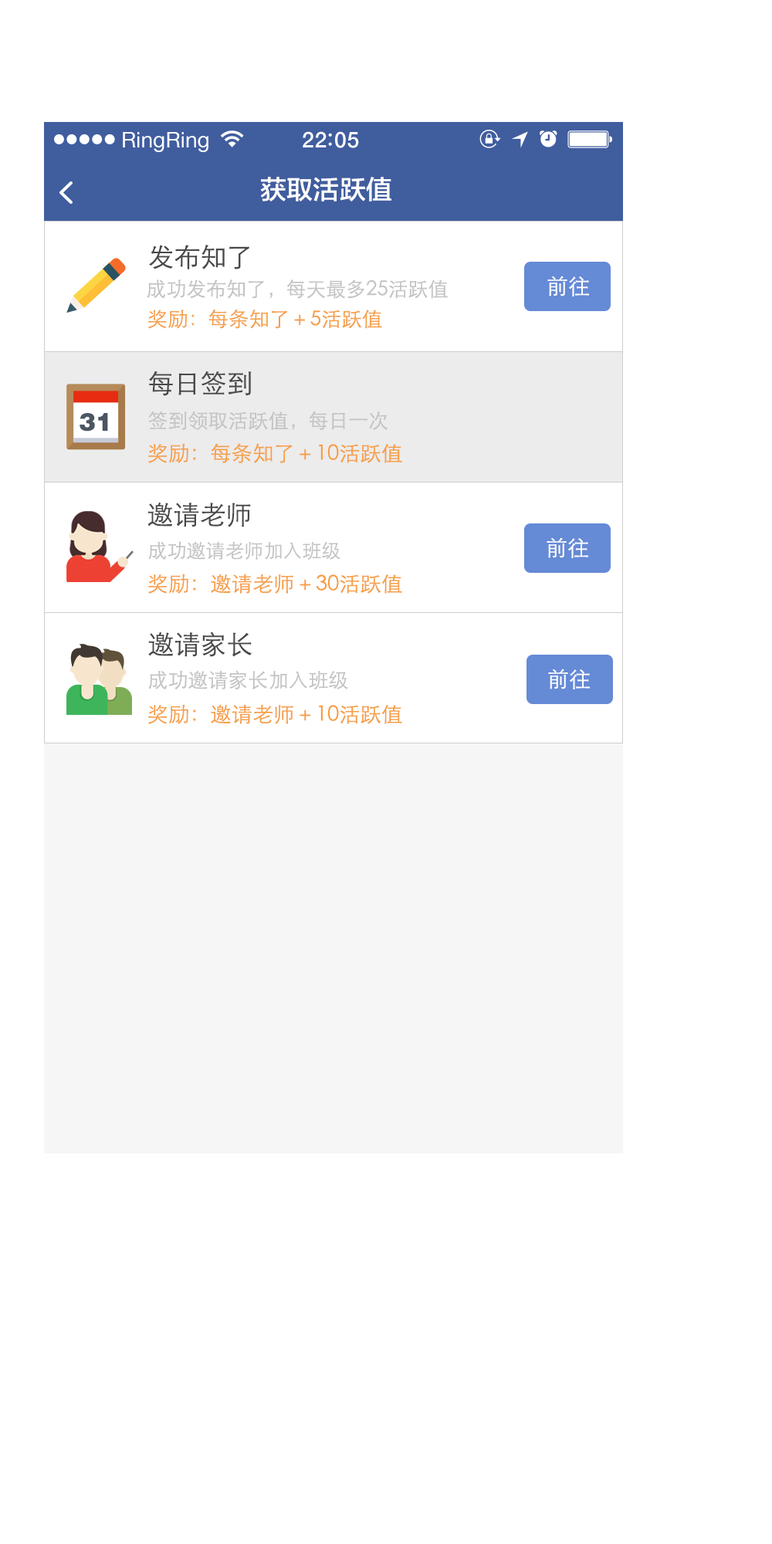
<style>
.page{position:relative;width:772px;height:1544px;background:#ffffff}
.page>*{position:absolute;margin:0}
.t1{font:21.9px "HelveticaNeue";color:#ffffff}
.t2{font:21.9px "HelveticaNeue-Medium";letter-spacing:0.03em;color:#ffffff}
.t3{font:26.3px "FZLTZHK--GBK1-0";letter-spacing:0.01em;color:#ffffff}
.t4{font:26.3px "STHeitiSC-Light";color:#494949}
.t5{font:20.1px "STHeitiSC-Light";color:#c3c3c3}
.t6{font:21.7px "STHeitiSC-Light";color:#f69e47}
.t7{font:21.6px "STHeitiSC-Light";color:#ffffff}
.t8{font:20.1px "STHeitiSC-Light";color:#f69e47}
.t9{font:25px "FZCCHJW--GB1-0";letter-spacing:0.01em;color:#4b5662}
.t10{font:21.6px "STHeitiSC-Light";color:#f69e47}
.t11{font:20.8px "STHeitiSC-Light";color:#f69e47}
.t12{font:19.3px "STHeitiSC-Light";color:#c3c3c3}
</style>
<div class="page">
<p class="t1" style="left:123px;top:132px;width:85px;height:20px">RingRing</p>
<p class="t2" style="left:303px;top:131px;width:56px;height:17px">22 05</p>
<p class="t3" style="left:260px;top:177px;width:131px;height:25px">获取活跃值</p>
<p class="t4" style="left:149px;top:245px;width:100px;height:24px">发布知了</p>
<p class="t5" style="left:147px;top:280px;width:301px;height:19px"><span class="t6">  </span>成功发布知了，每天最多25活跃值</p>
<p class="t7" style="left:547px;top:276px;width:42px;height:21px">前往</p>
<p class="t8" style="left:148px;top:309px;width:234px;height:20px">奖励：每条知了＋5活跃值</p>
<p class="t4" style="left:149px;top:371px;width:103px;height:25px">每日签到</p>
<p class="t9" style="left:80px;top:413px;width:28px;height:19px">31</p>
<p class="t5" style="left:148px;top:411px;width:240px;height:20px"><span class="t10">  </span>签到领取活跃值，每日一次</p>
<p class="t11" style="left:148px;top:443px;width:254px;height:20px">奖励：每条知了＋10活跃值</p>
<p class="t4" style="left:147px;top:502px;width:104px;height:25px">邀请老师</p>
<p class="t12" style="left:148px;top:541px;width:193px;height:19px"><span class="t10">  </span>成功邀请老师加入班级</p>
<p class="t7" style="left:547px;top:537px;width:41px;height:21px">前往</p>
<p class="t11" style="left:148px;top:574px;width:254px;height:20px">奖励：邀请老师＋30活跃值</p>
<p class="t4" style="left:148px;top:632px;width:104px;height:25px">邀请家长</p>
<p class="t5" style="left:148px;top:670px;width:200px;height:20px"><span class="t10">  </span>成功邀请家长加入班级</p>
<p class="t7" style="left:548px;top:669px;width:42px;height:21px">前往</p>
<p class="t11" style="left:148px;top:704px;width:254px;height:20px">奖励：邀请老师＋10活跃值</p>
</div>
